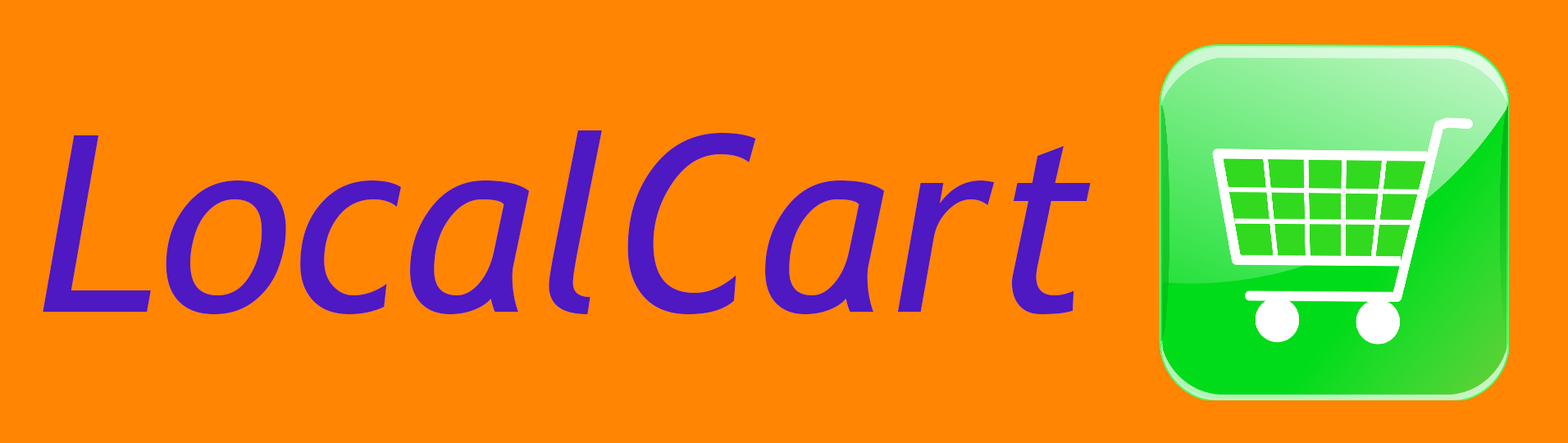
<style>
.page{position:relative;width:1568px;height:443px;background:#ff8503}
.page>*{position:absolute;margin:0}
.t1{font:246px "TrebuchetMS-Italic";color:#4e18c2}
</style>
<div class="page">
<p class="t1" style="left:43px;top:130px;width:1048px;height:184px">LocalCart</p>
</div>
